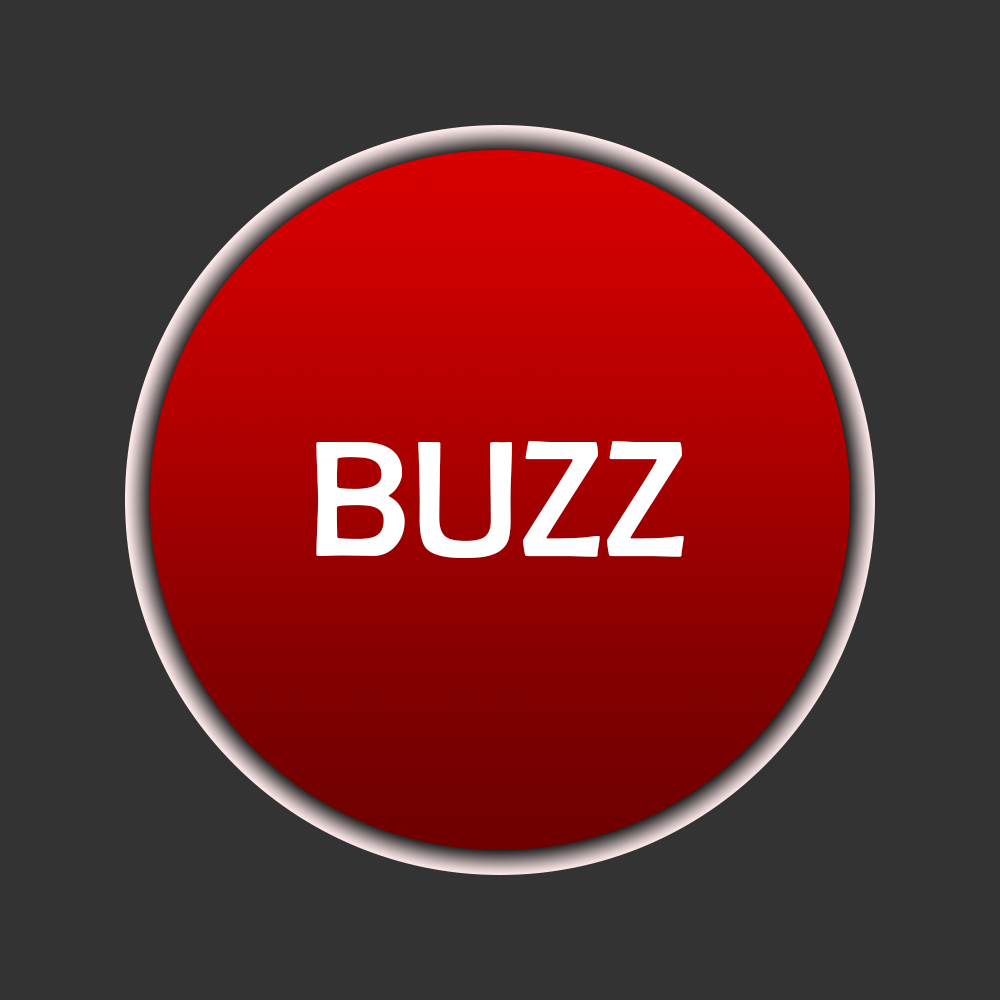
<style>
.page{position:relative;width:1000px;height:1000px;background:#333333}
.page>*{position:absolute;margin:0}
.t1{font:166.7px "BerlinSansFB-Reg";color:#ffffff}
</style>
<div class="page">
<p class="t1" style="left:316px;top:441px;width:368px;height:117px">BUZZ</p>
</div>
